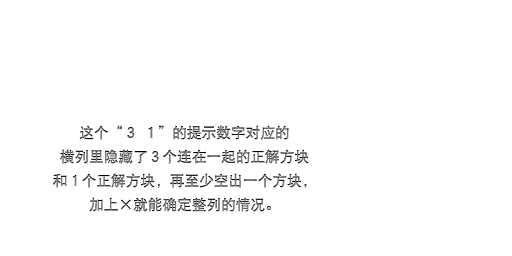
<style>
.page{position:relative;width:512px;height:256px;background:#ffffff}
.page>*{position:absolute;margin:0}
.t1{font:14.7px/24px "DFPHeiW5-GB"}
</style>
<div class="page">
<p class="t1" style="left:53px;top:125px;width:256px;height:87px;text-align:center">这个“３ １”的提示数字对应的<br>横列里隐藏了３个连在一起的正解方块<br>和１个正解方块，再至少空出一个方块，<br>加上×就能确定整列的情况。</p>
</div>
